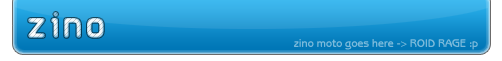
<style>
.page{position:relative;width:502px;height:61px}
.page>*{position:absolute;margin:0}
.t1{font:31px "AirstripFour";letter-spacing:0.1em}
.t2{font:11px "BenoitBold";color:#7ab9da}
</style>
<div class="page">
<p class="t1" style="left:28px;top:12px;width:76px;height:26px">zino</p>
<p class="t2" style="left:294px;top:39px;width:184px;height:11px">zino moto goes here -&gt; ROID RAGE :p</p>
</div>
